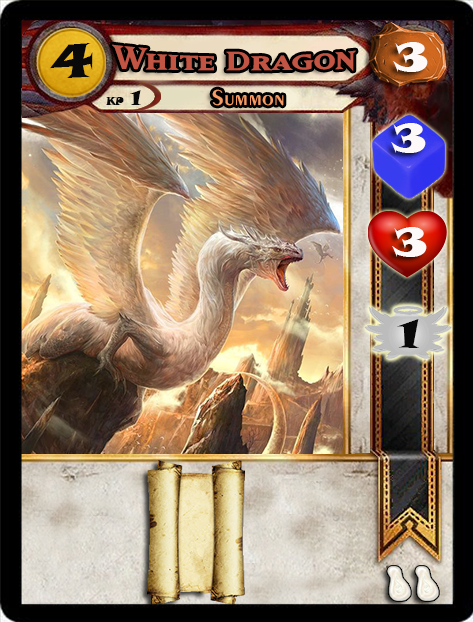
<style>
.page{position:relative;width:473px;height:622px}
.page>*{position:absolute;margin:0}
.t1{font:46.6px "SnapITC-Regular";color:#090909;scale:1.05 1}
.t2{font:40px "MatrixBoldSmallCaps";color:#c25443;scale:1.06 1}
.t3{font:40px "SnapITC-Regular";color:#fef9f9;scale:1.05 1}
.t4{font:22.7px "Exotic350BT-DemiBold";color:#f89c64;scale:1.06 1}
.t5{font:20.5px "SnapITC-Regular";color:#090909}
.t6{font:40px "SnapITC-Regular";color:#090909;scale:1.05 1}
</style>
<div class="page">
<p class="t1" style="left:50px;top:43px;width:43px;height:35px">4</p>
<p class="t2" style="left:112px;top:44px;width:244px;height:27px">White Dragon</p>
<p class="t3" style="left:393px;top:42px;width:35px;height:30px">3</p>
<p class="t4" style="left:212px;top:89px;width:72px;height:17px">Summon</p>
<p class="t5" style="left:130px;top:90px;width:11px;height:15px">1</p>
<p class="t3" style="left:391px;top:123px;width:35px;height:30px">3</p>
<p class="t3" style="left:392px;top:227px;width:35px;height:30px">3</p>
<p class="t6" style="left:397px;top:319px;width:22px;height:29px">1</p>
</div>
